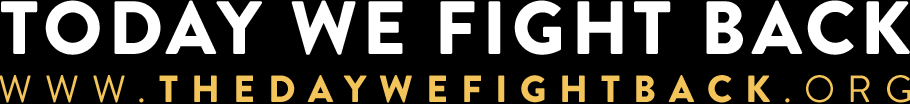
<style>
.page{position:relative;width:910px;height:104px;background:#000000}
.page>*{position:absolute;margin:0}
.t1{font:75.4px "BrandonGrotesque-Black";letter-spacing:0.08em;color:#ffffff}
.t2{font:37.8px "BrandonGrotesque-Black";letter-spacing:0.342em;color:#f2c45a}
.t3{font:37.8px "BrandonGrotesque-Regular";letter-spacing:0.342em;color:#f2c45a}
</style>
<div class="page">
<p class="t1" style="left:1px;top:0px;width:909px;height:55px">TODAY WE FIGHT BACK</p>
<p class="t2" style="left:0px;top:75px;width:911px;height:28px"><span class="t3">WWW.</span>THEDAYWEFIGHTBACK<span class="t3">.ORG</span></p>
</div>
